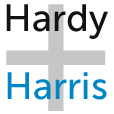
<style>
.page{position:relative;width:114px;height:114px;background:#ffffff}
.page>*{position:absolute;margin:0}
.t1{font:38px "MuseoSans-500";color:#121212}
.t2{font:38px "MuseoSans-500";color:#0086c4}
</style>
<div class="page">
<p class="t1" style="left:6px;top:4px;width:102px;height:35px">Hardy</p>
<p class="t2" style="left:7px;top:72px;width:100px;height:28px">Harris</p>
</div>
